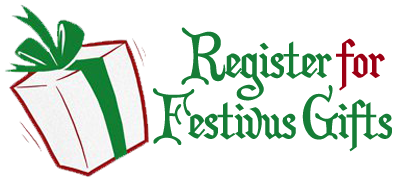
<style>
.page{position:relative;width:400px;height:181px;background:#ffffff}
.page>*{position:absolute;margin:0}
.t1{font:59.1px "ChristmasCardII";color:#157d36;scale:0.87 1}
.t2{font:59.1px "ChristmasCardII";color:#9c0014;scale:0.87 1}
</style>
<div class="page">
<p class="t1" style="left:181px;top:27px;width:204px;height:74px">Register <span class="t2">for</span></p>
<p class="t1" style="left:153px;top:85px;width:239px;height:67px">Festivus Gifts</p>
</div>
